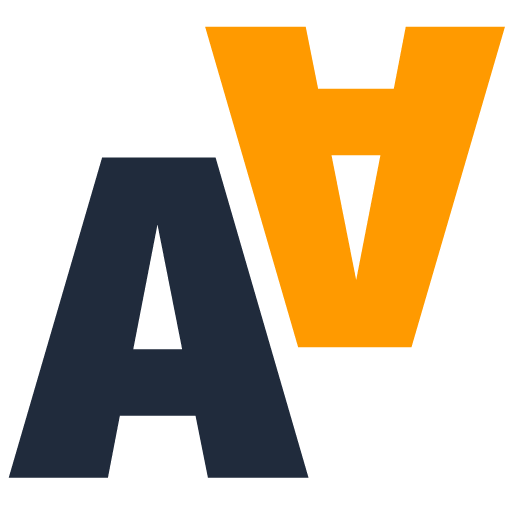
<style>
.page{position:relative;width:512px;height:512px;background:#ffffff}
.page>*{position:absolute;margin:0}
.t1{font:460px "FiraSans-Heavy";color:#ff9a00}
.t2{font:460px "FiraSans-Heavy";color:#202b3c}
</style>
<div class="page">
<p class="t1" style="left:205px;top:26px;width:300px;height:322px;rotate:180deg">A</p>
<p class="t2" style="left:8px;top:157px;width:301px;height:321px">A</p>
</div>
